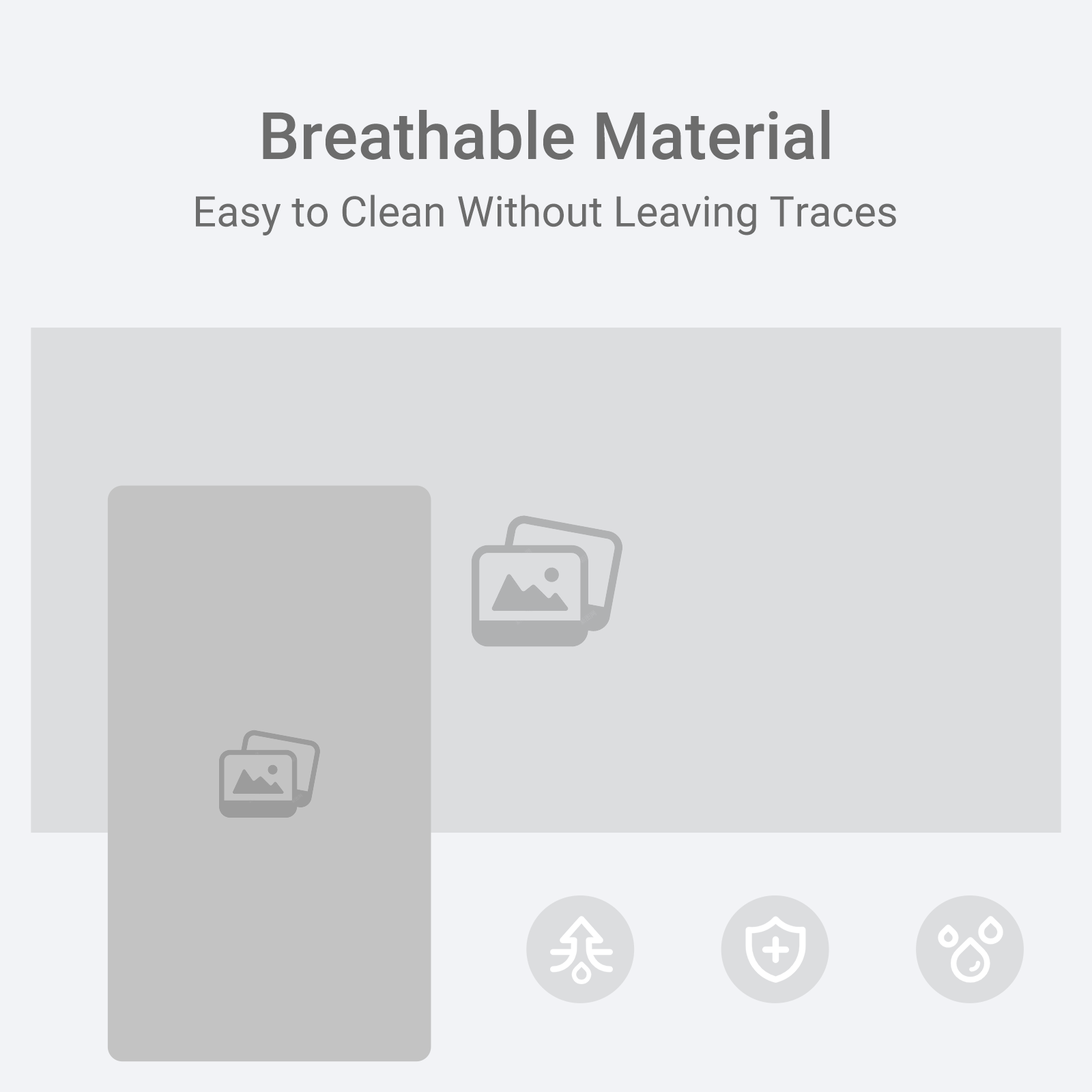
<style>
.page{position:relative;width:1092px;height:1092px;background:#f2f3f6}
.page>*{position:absolute;margin:0}
.t1{font:65.5px "Roboto-Medium";color:#6c6c6c}
.t2{font:42.2px "Roboto-Regular";color:#6c6c6c}
</style>
<div class="page">
<p class="t1" style="left:263px;top:110px;width:567px;height:50px">Breathable Material</p>
<p class="t2" style="left:196px;top:195px;width:700px;height:40px">Easy to Clean Without Leaving Traces</p>
</div>
